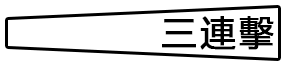
<style>
.page{position:relative;width:286px;height:66px;background:#ffffff}
.page>*{position:absolute;margin:0}
.t1{font:35px "MicrosoftYaHei";letter-spacing:0.06em;color:#000000;font-weight:bold}
</style>
<div class="page">
<p class="t1" style="left:162px;top:16px;width:112px;height:34px">三連擊</p>
</div>
